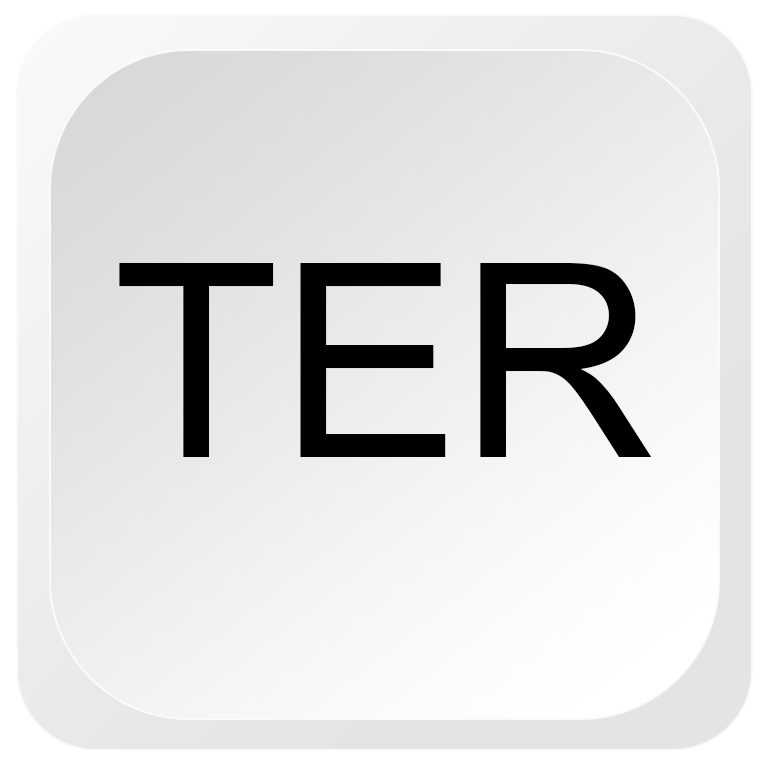
<style>
.page{position:relative;width:768px;height:768px}
.page>*{position:absolute;margin:0}
.t1{font:271px "ArialMT";color:#000000}
</style>
<div class="page">
<p class="t1" style="left:119px;top:263px;width:533px;height:194px">TER</p>
</div>
